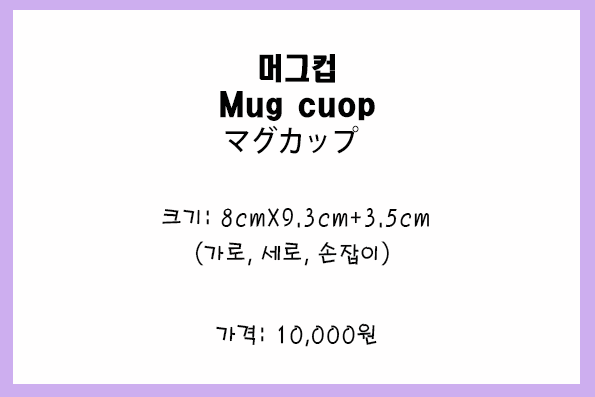
<style>
.page{position:relative;width:595px;height:397px;background:#fffefe}
.page>*{position:absolute;margin:0}
.t1{font:30px/36px "HeadlineR-HM";color:#010101;scale:0.9 1}
.t2{font:30px/36px "AdobeHeitiStd-Regular";color:#010101;scale:0.9 1}
.t3{font:24px/36px "H2porM";color:#040404;scale:0.9 1}
.t4{font:24px "H2porM";color:#040404;scale:0.9 1}
</style>
<div class="page">
<p class="t1" style="left:220px;top:54px;width:155px;height:100px;text-align:center">머그컵<br>Mug cuop<br><span class="t2">マグカップ</span></p>
<p class="t3" style="left:162px;top:208px;width:267px;height:58px;text-align:center">크기: 8cmX9.3cm+3.5cm<br>(가로, 세로, 손잡이)</p>
<p class="t4" style="left:216px;top:323px;width:161px;height:24px">가격: 10,000원</p>
</div>
